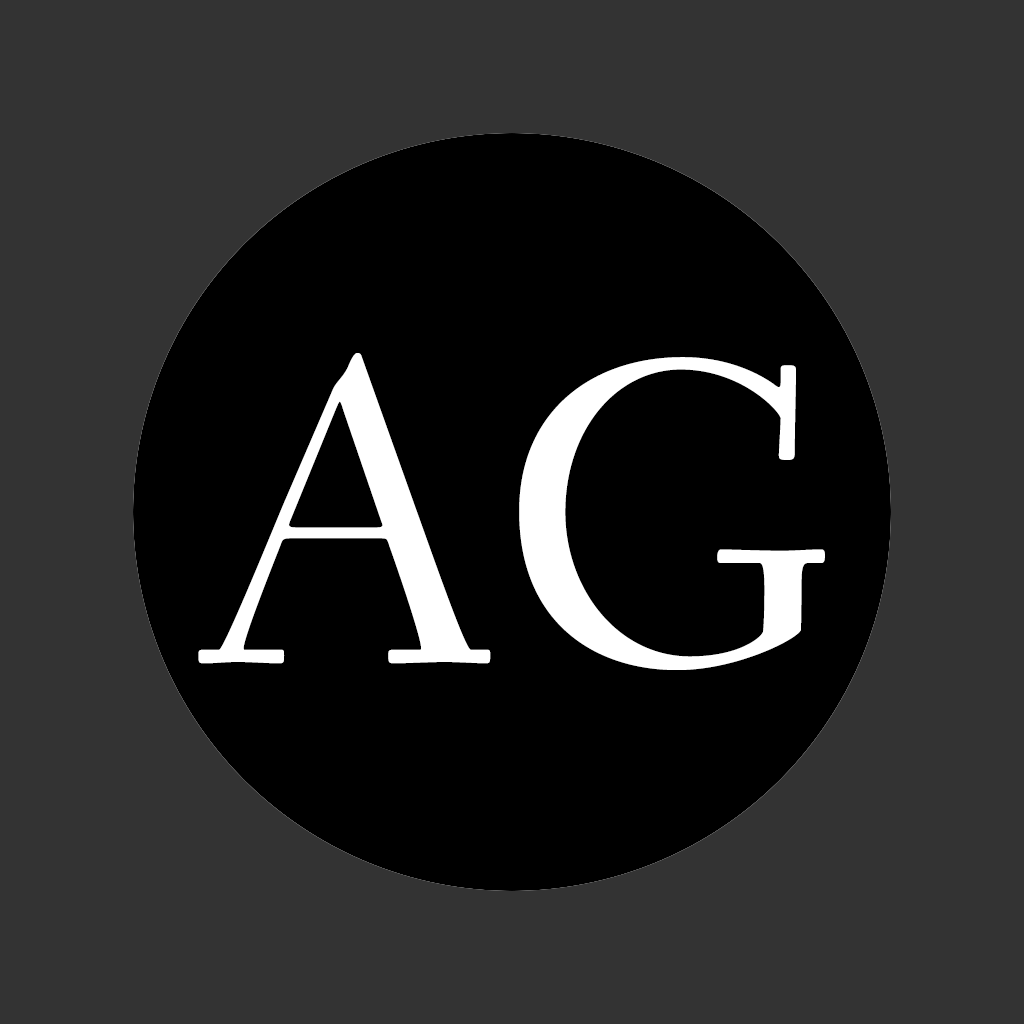
<style>
.page{position:relative;width:1024px;height:1024px;background:#333333}
.page>*{position:absolute;margin:0}
.t1{font:450px "Fanwood";letter-spacing:0.02em;color:#ffffff}
</style>
<div class="page">
<p class="t1" style="left:198px;top:353px;width:627px;height:317px">AG</p>
</div>
